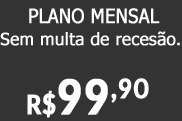
<style>
.page{position:relative;width:182px;height:121px;background:#333333}
.page>*{position:absolute;margin:0}
.t1{font:20px "Tahoma";color:#ffffff;font-weight:bold;scale:0.9 1}
.t2{font:17px "Tahoma";color:#ffffff;font-weight:bold}
.t3{font:30px "Carlito-Bold";color:#ffffff;font-weight:bold;scale:0.9 1}
.t4{font:54px "Carlito-Bold";color:#ffffff;font-weight:bold;scale:0.9 1}
</style>
<div class="page">
<p class="t1" style="left:29px;top:8px;width:131px;height:16px">PLANO MENSAL</p>
<p class="t2" style="left:0px;top:31px;width:180px;height:15px">Sem multa de recesão.</p>
<p class="t3" style="left:27px;top:78px;width:81px;height:40px">R$<span class="t4">99</span></p>
<p class="t3" style="left:111px;top:78px;width:38px;height:25px">,90</p>
</div>
